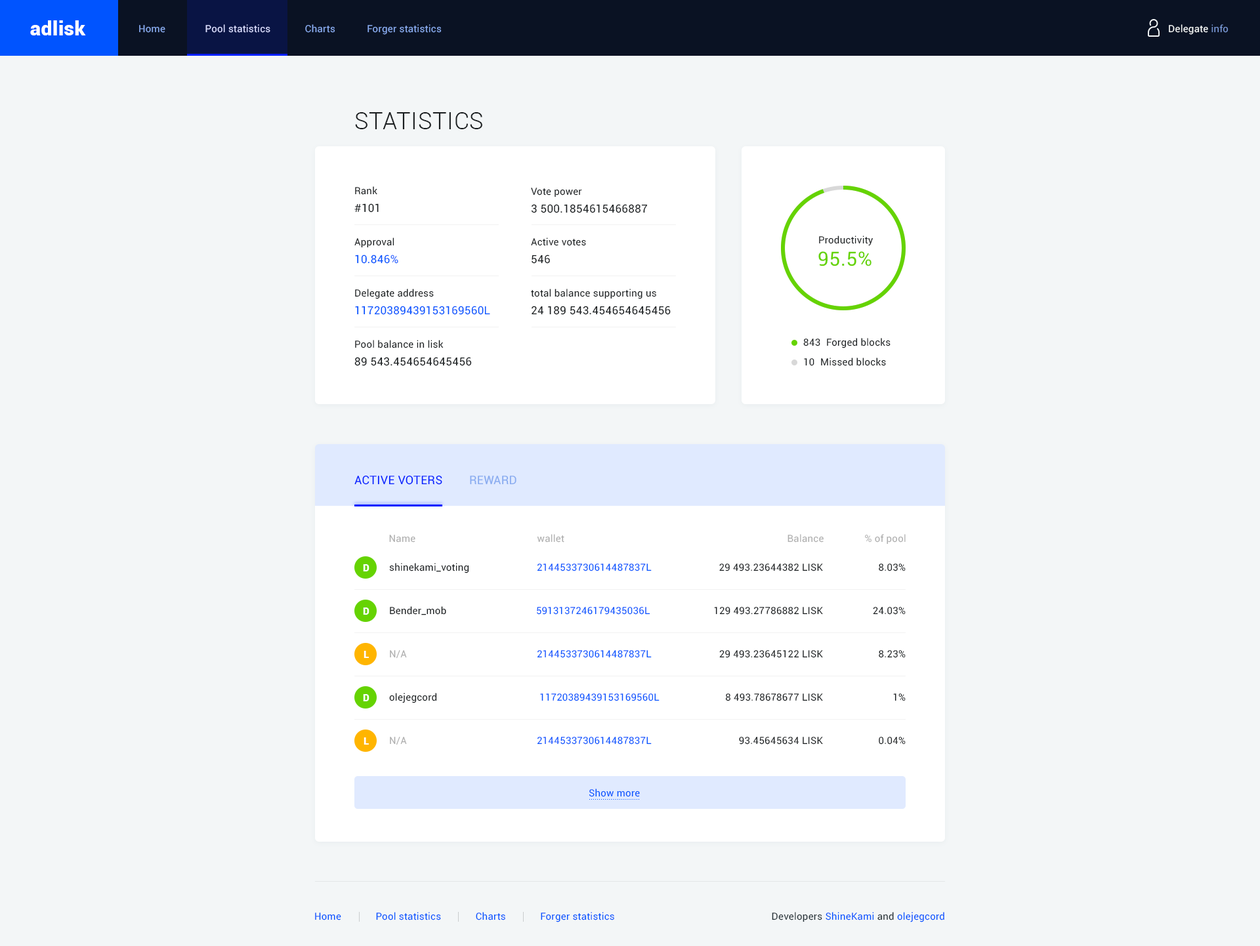
<style>
.page{position:relative;width:1260px;height:946px;background:#f3f6f7}
.page>*{position:absolute;margin:0}
.t1{font:19.7px "Roboto-Black";letter-spacing:0.02em;color:#ffffff}
.t2{font:9.8px "Roboto-Regular";letter-spacing:0.02em;color:#88abf0}
.t3{font:9.8px "Roboto-Regular";letter-spacing:0.02em;color:#ffffff}
.t4{font:9.8px "Roboto-Regular";letter-spacing:0.02em;color:#f3f6f7}
.t5{font:9.8px "Roboto-Regular";letter-spacing:0.02em;color:#7695d2}
.t6{font:23.6px "Roboto-Light";letter-spacing:0.02em;color:#191d1f;text-transform:uppercase}
.t7{font:9.8px "Roboto-Regular";letter-spacing:0.02em;color:#191d1f}
.t8{font:11.2px "Roboto-Regular";letter-spacing:0.02em;color:#191d1f}
.t9{font:11.2px "Roboto-Regular";letter-spacing:0.02em;color:#0054ff}
.t10{font:19.7px "Roboto-Regular";letter-spacing:0.02em;color:#65d302}
.t11{font:11.8px "Roboto-Regular";letter-spacing:0.02em;color:#001eff;text-transform:uppercase}
.t12{font:11.8px "Roboto-Regular";letter-spacing:0.02em;color:#88abf0;text-transform:uppercase}
.t13{font:9.8px "Roboto-Regular";letter-spacing:0.02em;color:#aeaeae}
.t14{font:9.8px "Roboto-Black";letter-spacing:0.02em;color:#ffffff}
.t15{font:9.8px "Roboto-Regular";letter-spacing:0.02em;color:#0054ff}
.t16{font:9.8px "Roboto-Regular";letter-spacing:0.02em;color:#263238}
</style>
<div class="page">
<p class="t1" style="left:30px;top:20px;width:56px;height:15px">adlisk</p>
<p class="t2" style="left:139px;top:24px;width:303px;height:11px">Home               <span class="t3">Pool statistics</span>             Charts            Forger statistics</p>
<p class="t4" style="left:1169px;top:24px;width:60px;height:11px">Delegate <span class="t5">info</span></p>
<p class="t6" style="left:355px;top:112px;width:127px;height:17px">Statistics</p>
<p class="t7" style="left:355px;top:186px;width:22px;height:9px">Rank</p>
<p class="t7" style="left:531px;top:188px;width:51px;height:9px">Vote power</p>
<p class="t8" style="left:354px;top:203px;width:25px;height:10px">#101</p>
<p class="t8" style="left:532px;top:204px;width:116px;height:9px">3 500.1854615466887</p>
<p class="t7" style="left:354px;top:238px;width:40px;height:10px">Approval</p>
<p class="t7" style="left:531px;top:238px;width:55px;height:8px">Active votes</p>
<p class="t7" style="left:819px;top:236px;width:54px;height:10px">Productivity</p>
<p class="t9" style="left:355px;top:255px;width:43px;height:9px">10.846%</p>
<p class="t8" style="left:532px;top:255px;width:18px;height:9px">546</p>
<p class="t10" style="left:818px;top:251px;width:54px;height:15px">95.5%</p>
<p class="t7" style="left:355px;top:289px;width:79px;height:10px">Delegate address</p>
<p class="t7" style="left:531px;top:289px;width:125px;height:10px">total balance supporting us</p>
<p class="t9" style="left:355px;top:306px;width:135px;height:9px">11720389439153169560L</p>
<p class="t8" style="left:532px;top:306px;width:139px;height:9px">24 189 543.454654645456</p>
<p class="t7" style="left:355px;top:340px;width:89px;height:8px">Pool balance in lisk</p>
<p class="t7" style="left:803px;top:339px;width:17px;height:8px">843</p>
<p class="t7" style="left:827px;top:338px;width:64px;height:10px">Forged blocks</p>
<p class="t8" style="left:354px;top:357px;width:118px;height:9px">89 543.454654645456</p>
<p class="t7" style="left:804px;top:358px;width:10px;height:8px">10</p>
<p class="t7" style="left:821px;top:358px;width:65px;height:8px">Missed blocks</p>
<p class="t11" style="left:354px;top:475px;width:88px;height:10px">Active Voters</p>
<p class="t12" style="left:470px;top:476px;width:46px;height:9px">reward</p>
<p class="t13" style="left:389px;top:535px;width:26px;height:8px">Name</p>
<p class="t13" style="left:537px;top:534px;width:27px;height:9px">wallet</p>
<p class="t13" style="left:788px;top:534px;width:36px;height:9px">Balance</p>
<p class="t13" style="left:865px;top:534px;width:41px;height:11px">% of pool</p>
<p class="t14" style="left:363px;top:564px;width:6px;height:8px">D</p>
<p class="t7" style="left:389px;top:563px;width:80px;height:11px">shinekami_voting</p>
<p class="t15" style="left:537px;top:564px;width:115px;height:8px">2144533730614487837L</p>
<p class="t7" style="left:719px;top:564px;width:104px;height:8px">29 493.23644382 LISK</p>
<p class="t7" style="left:879px;top:564px;width:27px;height:8px">8.03%</p>
<p class="t14" style="left:363px;top:608px;width:6px;height:7px">D</p>
<p class="t7" style="left:390px;top:606px;width:56px;height:10px">Bender_mob</p>
<p class="t15" style="left:537px;top:607px;width:113px;height:8px">5913137246179435036L</p>
<p class="t7" style="left:714px;top:607px;width:109px;height:8px">129 493.27786882 LISK</p>
<p class="t7" style="left:873px;top:607px;width:33px;height:8px">24.03%</p>
<p class="t14" style="left:364px;top:651px;width:5px;height:7px">L</p>
<p class="t13" style="left:390px;top:650px;width:17px;height:9px">N/A</p>
<p class="t15" style="left:537px;top:650px;width:115px;height:8px">2144533730614487837L</p>
<p class="t7" style="left:719px;top:650px;width:104px;height:8px">29 493.23645122 LISK</p>
<p class="t7" style="left:879px;top:650px;width:27px;height:8px">8.23%</p>
<p class="t14" style="left:363px;top:694px;width:6px;height:8px">D</p>
<p class="t7" style="left:389px;top:693px;width:48px;height:11px">olejegcord</p>
<p class="t15" style="left:540px;top:694px;width:120px;height:8px">11720389439153169560L</p>
<p class="t7" style="left:725px;top:694px;width:98px;height:8px">8 493.78678677 LISK</p>
<p class="t7" style="left:893px;top:694px;width:13px;height:8px">1%</p>
<p class="t14" style="left:364px;top:738px;width:5px;height:7px">L</p>
<p class="t13" style="left:390px;top:737px;width:17px;height:9px">N/A</p>
<p class="t15" style="left:537px;top:737px;width:115px;height:8px">2144533730614487837L</p>
<p class="t7" style="left:739px;top:737px;width:84px;height:8px">93.45645634 LISK</p>
<p class="t7" style="left:879px;top:737px;width:27px;height:8px">0.04%</p>
<p class="t15" style="left:589px;top:789px;width:51px;height:8px">Show more</p>
<p class="t15" style="left:315px;top:912px;width:299px;height:11px">Home             Pool statistics             Charts             Forger statistics</p>
<p class="t16" style="left:772px;top:912px;width:172px;height:11px">Developers <span class="t15">ShineKami</span> and <span class="t15">olejegcord</span></p>
</div>
